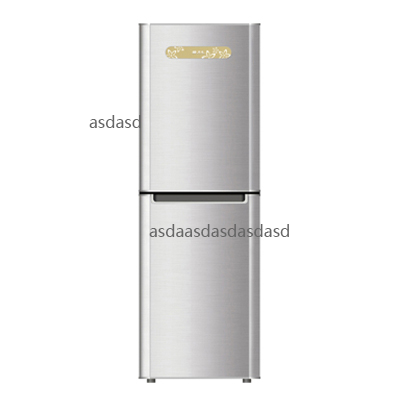
<style>
.page{position:relative;width:398px;height:398px;background:#ffffff}
.page>*{position:absolute;margin:0}
.t1{font:16px "MicrosoftYaHei";color:#666666}
</style>
<div class="page">
<p class="t1" style="left:89px;top:115px;width:52px;height:13px">asdasd</p>
<p class="t1" style="left:149px;top:224px;width:140px;height:13px">asdaasdasdasdasd</p>
</div>
